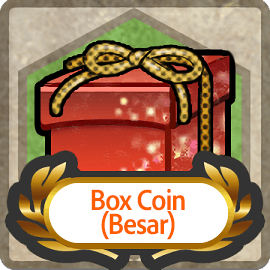
<style>
.page{position:relative;width:270px;height:270px}
.page>*{position:absolute;margin:0}
.t1{font:30px/24px "AdobeClean-Bold";letter-spacing:-0.04em;color:#ff5d00;scale:0.9 1}
</style>
<div class="page">
<p class="t1" style="left:91px;top:188px;width:94px;height:52px;text-align:center">Box Coin<br>(Besar)</p>
</div>
